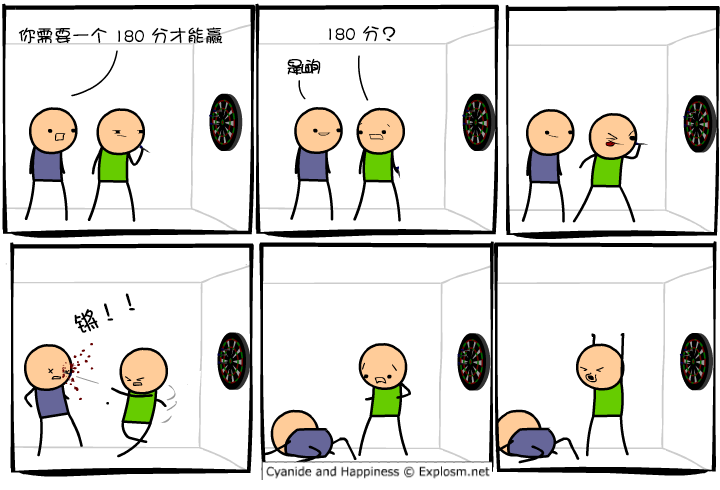
<style>
.page{position:relative;width:720px;height:490px;background:#ffffff}
.page>*{position:absolute;margin:0}
.t1{font:18px "DFGirl";color:#000000}
.t2{font:24px "DFGirl";color:#000000}
</style>
<div class="page">
<p class="t1" style="left:18px;top:27px;width:205px;height:17px">你需要一个 180 分才能赢</p>
<p class="t1" style="left:329px;top:26px;width:67px;height:16px">180 分？</p>
<p class="t1" style="left:287px;top:58px;width:34px;height:17px">是的</p>
<p class="t2" style="left:74px;top:293px;width:61px;height:40px;rotate:-24deg">锵！！</p>
</div>
